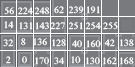
<style>
.page{position:relative;width:135px;height:67px;background:#787a7e}
.page>*{position:absolute;margin:0}
.t1{font:10px "MongolianBaiti";color:#ffffff;text-transform:uppercase}
</style>
<div class="page">
<p class="t1" style="left:54px;top:6px;width:10px;height:8px">62</p>
<p class="t1" style="left:68px;top:6px;width:16px;height:8px">239</p>
<p class="t1" style="left:87px;top:6px;width:13px;height:8px">191</p>
<p class="t1" style="left:4px;top:7px;width:10px;height:8px">56</p>
<p class="t1" style="left:18px;top:7px;width:15px;height:8px">224</p>
<p class="t1" style="left:34px;top:7px;width:16px;height:8px">248</p>
<p class="t1" style="left:4px;top:21px;width:10px;height:8px">14</p>
<p class="t1" style="left:19px;top:22px;width:14px;height:8px">131</p>
<p class="t1" style="left:36px;top:22px;width:13px;height:8px">143</p>
<p class="t1" style="left:50px;top:22px;width:15px;height:8px">227</p>
<p class="t1" style="left:68px;top:22px;width:15px;height:8px">251</p>
<p class="t1" style="left:85px;top:22px;width:16px;height:8px">254</p>
<p class="t1" style="left:103px;top:22px;width:15px;height:8px">255</p>
<p class="t1" style="left:3px;top:39px;width:10px;height:8px">32</p>
<p class="t1" style="left:21px;top:38px;width:5px;height:8px">8</p>
<p class="t1" style="left:33px;top:38px;width:14px;height:8px">136</p>
<p class="t1" style="left:52px;top:39px;width:14px;height:8px">128</p>
<p class="t1" style="left:72px;top:40px;width:10px;height:8px">40</p>
<p class="t1" style="left:87px;top:40px;width:14px;height:8px">160</p>
<p class="t1" style="left:104px;top:39px;width:11px;height:8px">42</p>
<p class="t1" style="left:120px;top:39px;width:14px;height:8px">138</p>
<p class="t1" style="left:6px;top:56px;width:5px;height:8px">2</p>
<p class="t1" style="left:22px;top:56px;width:5px;height:8px">0</p>
<p class="t1" style="left:35px;top:57px;width:14px;height:8px">170</p>
<p class="t1" style="left:54px;top:57px;width:11px;height:8px">34</p>
<p class="t1" style="left:71px;top:56px;width:10px;height:8px">10</p>
<p class="t1" style="left:86px;top:57px;width:14px;height:8px">130</p>
<p class="t1" style="left:103px;top:57px;width:14px;height:8px">162</p>
<p class="t1" style="left:120px;top:57px;width:14px;height:8px">168</p>
</div>
